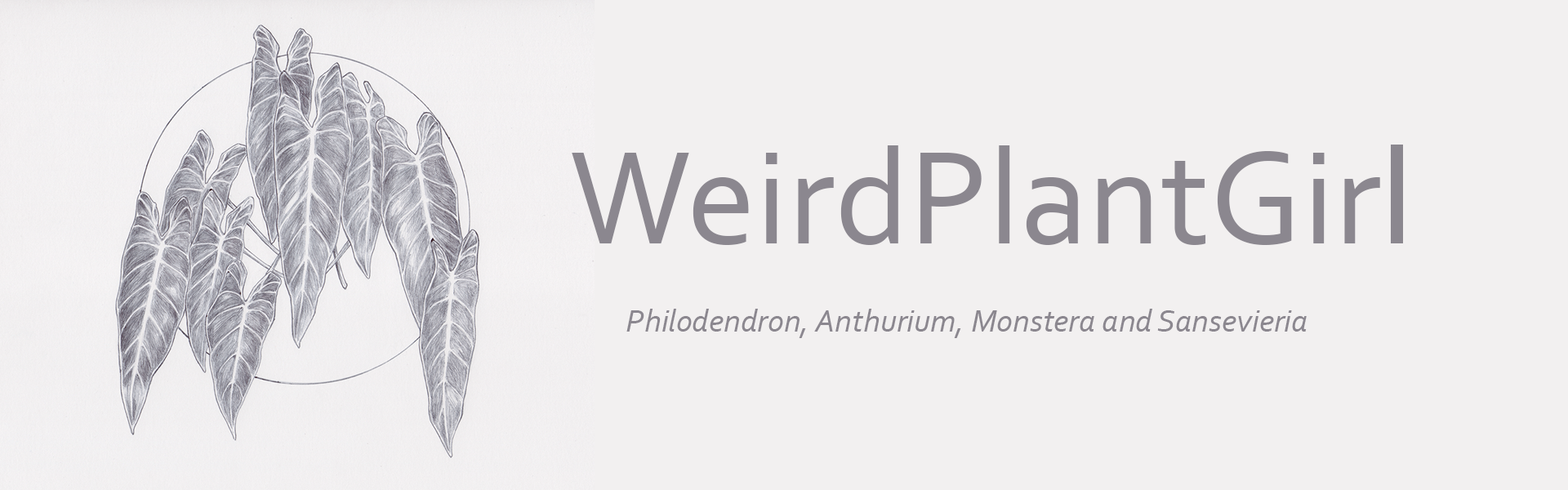
<style>
.page{position:relative;width:1568px;height:490px;background:#f2f0f0}
.page>*{position:absolute;margin:0}
.t1{font:138.8px "Corbel";color:#8b878f}
.t2{font:138.8px "MyriadPro-Regular";color:#8b878f}
.t3{font:32.7px "Corbel-Italic";color:#8b878f}
</style>
<div class="page">
<p class="t1" style="left:572px;top:145px;width:831px;height:100px">WeirdPlantGir<span class="t2">l</span></p>
<p class="t3" style="left:626px;top:309px;width:681px;height:29px">Philodendron, Anthurium, Monstera and Sansevieria</p>
</div>
